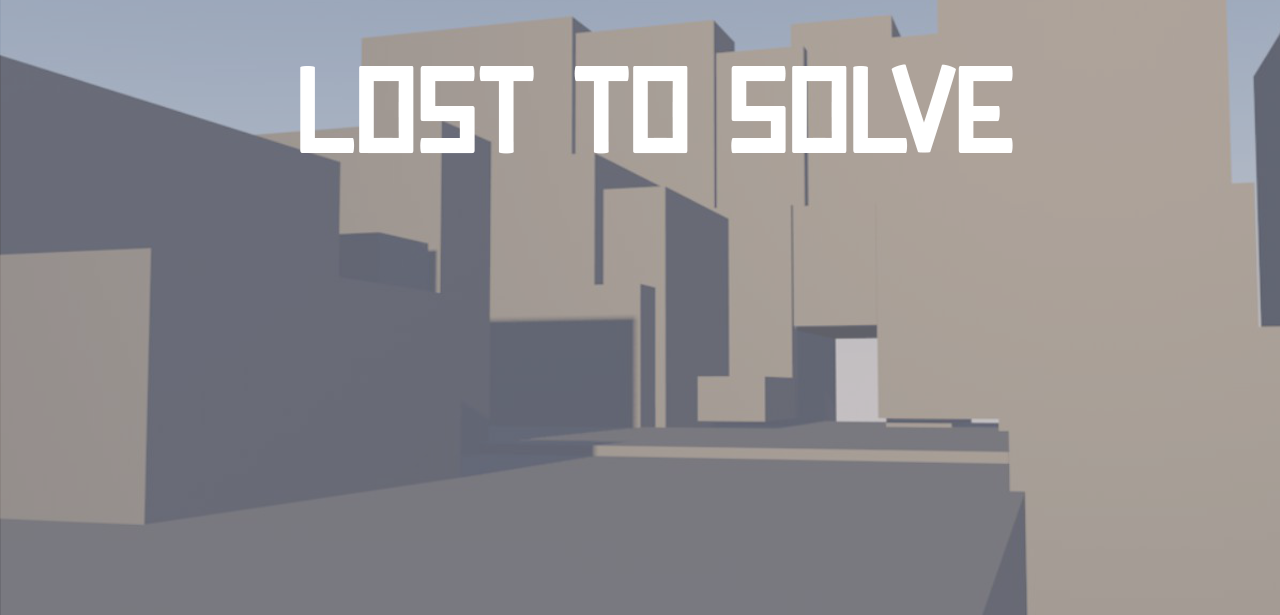
<style>
.page{position:relative;width:1280px;height:615px}
.page>*{position:absolute;margin:0}
.t1{font:124.6px "darkforest";color:#ffffff}
</style>
<div class="page">
<p class="t1" style="left:300px;top:64px;width:713px;height:90px">LOST TO SOLVE</p>
</div>
